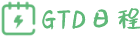
<style>
.page{position:relative;width:140px;height:37px;background:#ffffff}
.page>*{position:absolute;margin:0}
.t1{font:29px "Muyao-Softbrush";color:#5fb878}
</style>
<div class="page">
<p class="t1" style="left:42px;top:7px;width:100px;height:23px">GTD日程</p>
</div>
